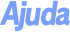
<style>
.page{position:relative;width:70px;height:32px;background:#ffffff}
.page>*{position:absolute;margin:0}
.t1{font:30.7px "RodinPro-EB";letter-spacing:-0.067em;color:#789ffe;font-style:italic;scale:0.83 1}
</style>
<div class="page">
<p class="t1" style="left:0px;top:0px;width:71px;height:32px">Ajuda</p>
</div>
